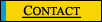
<style>
.page{position:relative;width:102px;height:22px;background:#f9d305}
.page>*{position:absolute;margin:0}
.t1{font:12px "TimesNewRomanPSMT";color:#000000}
.t2{font:14px "TimesNewRomanPSMT";color:#000000}
.t3{font:13px "TimesNewRomanPS-BoldMT";color:#000000}
</style>
<div class="page">
<p class="t1" style="left:23px;top:5px;width:57px;height:11px"><span class="t2">C</span>ONTACT</p>
<p class="t3" style="left:22px;top:16px;width:59px;height:2px"><span class="t2">      </span>_________</p>
</div>
